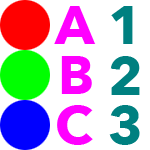
<style>
.page{position:relative;width:150px;height:150px;background:#ffffff}
.page>*{position:absolute;margin:0}
.t1{font:54.2px "AvenirNext-Bold";color:#ff00ff}
.t2{font:54.2px "AvenirNext-Bold";color:#008080}
</style>
<div class="page">
<p class="t1" style="left:54px;top:6px;width:42px;height:38px">A</p>
<p class="t2" style="left:111px;top:6px;width:22px;height:38px">1</p>
<p class="t1" style="left:61px;top:56px;width:31px;height:38px">B</p>
<p class="t2" style="left:110px;top:56px;width:30px;height:39px">2</p>
<p class="t1" style="left:57px;top:105px;width:36px;height:40px">C</p>
<p class="t2" style="left:109px;top:105px;width:31px;height:40px">3</p>
</div>
